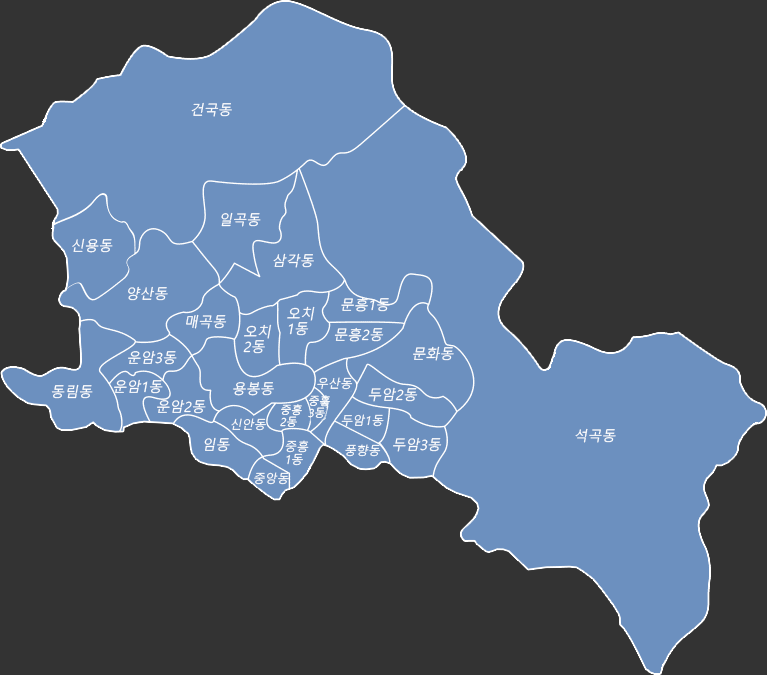
<style>
.page{position:relative;width:767px;height:675px;background:#333333}
.page>*{position:absolute;margin:0}
.t1{font:14px "MalgunGothic";color:#ffffff;font-style:italic}
.t2{font:14px/15px "MalgunGothic";color:#ffffff;font-style:italic}
.t3{font:12px "MalgunGothic";color:#ffffff;font-style:italic}
.t4{font:11px/12px "MalgunGothic";color:#ffffff;font-style:italic}
.t5{font:12px/13px "MalgunGothic";color:#ffffff;font-style:italic}
</style>
<div class="page">
<p class="t1" style="left:191px;top:102px;width:41px;height:15px">건국동</p>
<p class="t1" style="left:221px;top:212px;width:40px;height:15px">일곡동</p>
<p class="t1" style="left:72px;top:238px;width:41px;height:15px">신용동</p>
<p class="t1" style="left:273px;top:253px;width:41px;height:15px">삼각동</p>
<p class="t1" style="left:128px;top:286px;width:40px;height:15px">양산동</p>
<p class="t1" style="left:341px;top:297px;width:49px;height:15px">문흥1동</p>
<p class="t1" style="left:186px;top:314px;width:41px;height:15px">매곡동</p>
<p class="t2" style="left:287px;top:306px;width:28px;height:30px">오치<br>1동</p>
<p class="t2" style="left:243px;top:324px;width:29px;height:30px">오치<br>2동</p>
<p class="t1" style="left:334px;top:327px;width:50px;height:15px">문흥2동</p>
<p class="t1" style="left:128px;top:350px;width:49px;height:15px">운암3동</p>
<p class="t1" style="left:413px;top:346px;width:41px;height:15px">문화동</p>
<p class="t3" style="left:317px;top:377px;width:36px;height:13px">우산동</p>
<p class="t1" style="left:51px;top:384px;width:42px;height:15px">동림동</p>
<p class="t1" style="left:114px;top:379px;width:49px;height:15px">운암1동</p>
<p class="t1" style="left:233px;top:382px;width:41px;height:14px">용봉동</p>
<p class="t1" style="left:368px;top:387px;width:50px;height:15px">두암2동</p>
<p class="t1" style="left:157px;top:399px;width:49px;height:15px">운암2동</p>
<p class="t4" style="left:308px;top:395px;width:22px;height:23px">중흫<br>3동</p>
<p class="t4" style="left:280px;top:404px;width:22px;height:23px">중흥<br>2동</p>
<p class="t3" style="left:341px;top:414px;width:43px;height:13px">두암1동</p>
<p class="t3" style="left:231px;top:418px;width:35px;height:13px">신안동</p>
<p class="t1" style="left:204px;top:437px;width:26px;height:15px">임동</p>
<p class="t1" style="left:393px;top:437px;width:49px;height:15px">두암3동</p>
<p class="t1" style="left:575px;top:428px;width:41px;height:15px">석곡동</p>
<p class="t5" style="left:285px;top:440px;width:24px;height:26px">중흥<br>1동</p>
<p class="t3" style="left:345px;top:444px;width:36px;height:13px">풍향동</p>
<p class="t3" style="left:254px;top:472px;width:35px;height:13px">중앙동</p>
</div>
